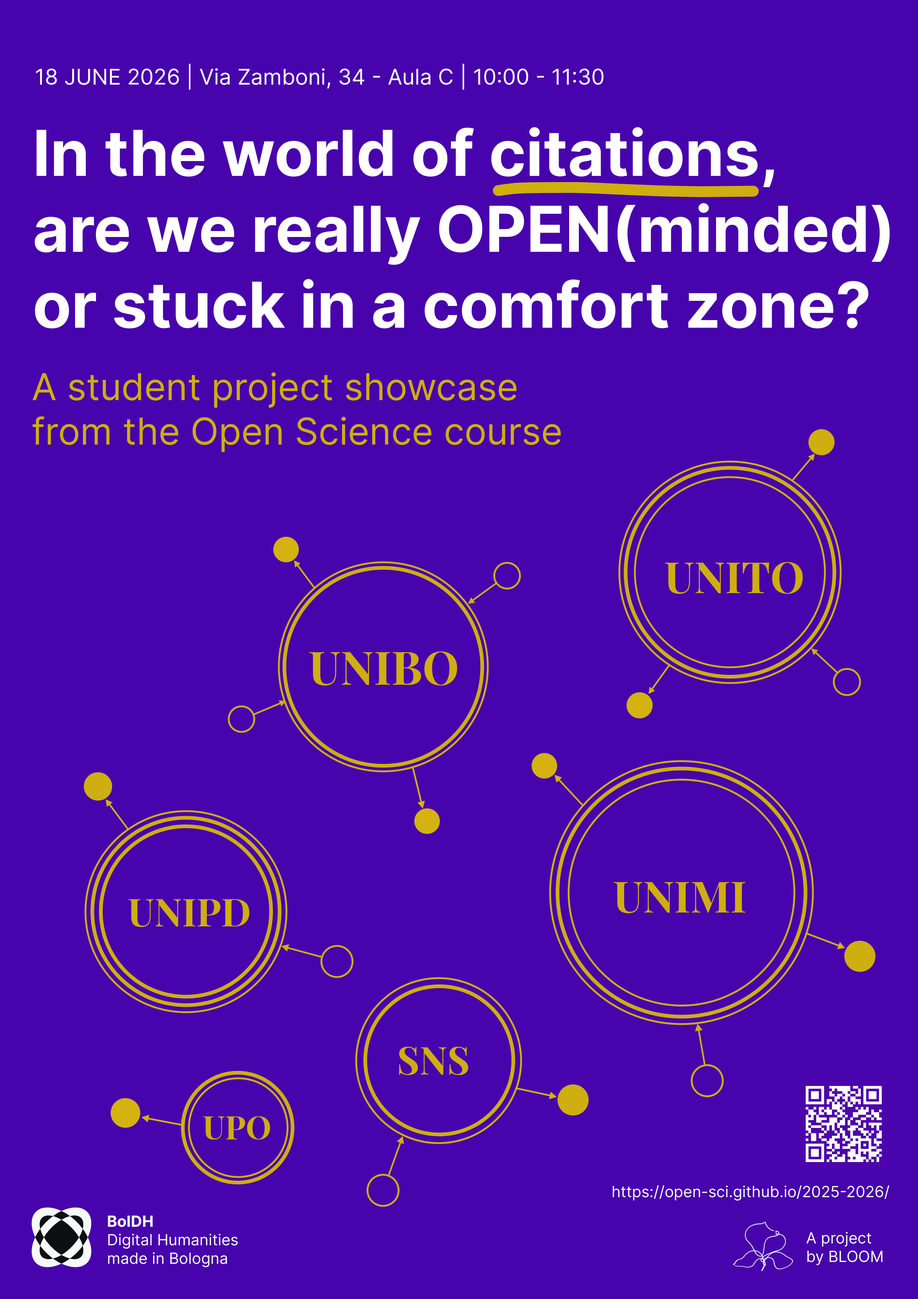
<style>
.page{position:relative;width:918px;height:1299px;background:#4704ac}
.page>*{position:absolute;margin:0}
.t1{font:21.6px "Inter-Regular";color:#ffffff}
.t2{font:37px "Inter-Regular";color:#cfae0e}
.t3{font:43.2px "PlayfairDisplay-Bold";color:#cfae0e}
.t4{font:46.3px "PlayfairDisplay-Bold";color:#cfae0e}
.t5{font:38.6px "PlayfairDisplay-Bold";color:#cfae0e}
.t6{font:32.4px "PlayfairDisplay-Bold";color:#cfae0e}
.t7{font:15.4px "Inter-Regular";color:#ffffff}
.t8{font:15.4px "Inter-Bold";color:#ffffff}
</style>
<div class="page">
<p class="t1" style="left:36px;top:64px;width:568px;height:26px">18 JUNE 2026 | Via Zamboni, 34 - Aula C | 10:00 - 11:30</p>
<p class="t2" style="left:33px;top:372px;width:528px;height:80px">A student project showcase <br>from the Open Science course</p>
<p class="t3" style="left:665px;top:562px;width:138px;height:32px">UNITO</p>
<p class="t4" style="left:309px;top:651px;width:148px;height:34px">UNIBO</p>
<p class="t3" style="left:614px;top:882px;width:131px;height:31px">UNIMI</p>
<p class="t5" style="left:128px;top:899px;width:122px;height:28px">UNIPD</p>
<p class="t5" style="left:399px;top:1046px;width:69px;height:29px">SNS</p>
<p class="t6" style="left:203px;top:1116px;width:67px;height:23px">UPO</p>
<p class="t7" style="left:613px;top:1185px;width:277px;height:15px">https://open-sci.github.io/2025-2026/</p>
<p class="t7" style="left:108px;top:1215px;width:130px;height:52px"><span class="t8">BolDH<br></span>Digital Humanities<br>made in Bologna</p>
<p class="t7" style="left:807px;top:1231px;width:76px;height:34px">A project<br>by BLOOM</p>
</div>
